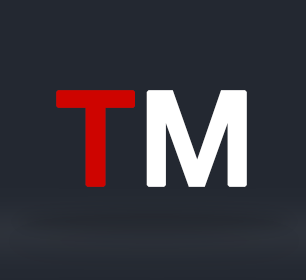
<style>
.page{position:relative;width:306px;height:280px;background:#232831}
.page>*{position:absolute;margin:0}
.t1{font:130px "HelveticaNeue-Medium";letter-spacing:0.01em;color:#ce0400;text-transform:uppercase;font-weight:bold}
.t2{font:130px "HelveticaNeue-Medium";letter-spacing:0.01em;color:#ffffff;text-transform:uppercase;font-weight:bold}
</style>
<div class="page">
<p class="t1" style="left:56px;top:90px;width:191px;height:97px">T<span class="t2">M</span></p>
</div>
